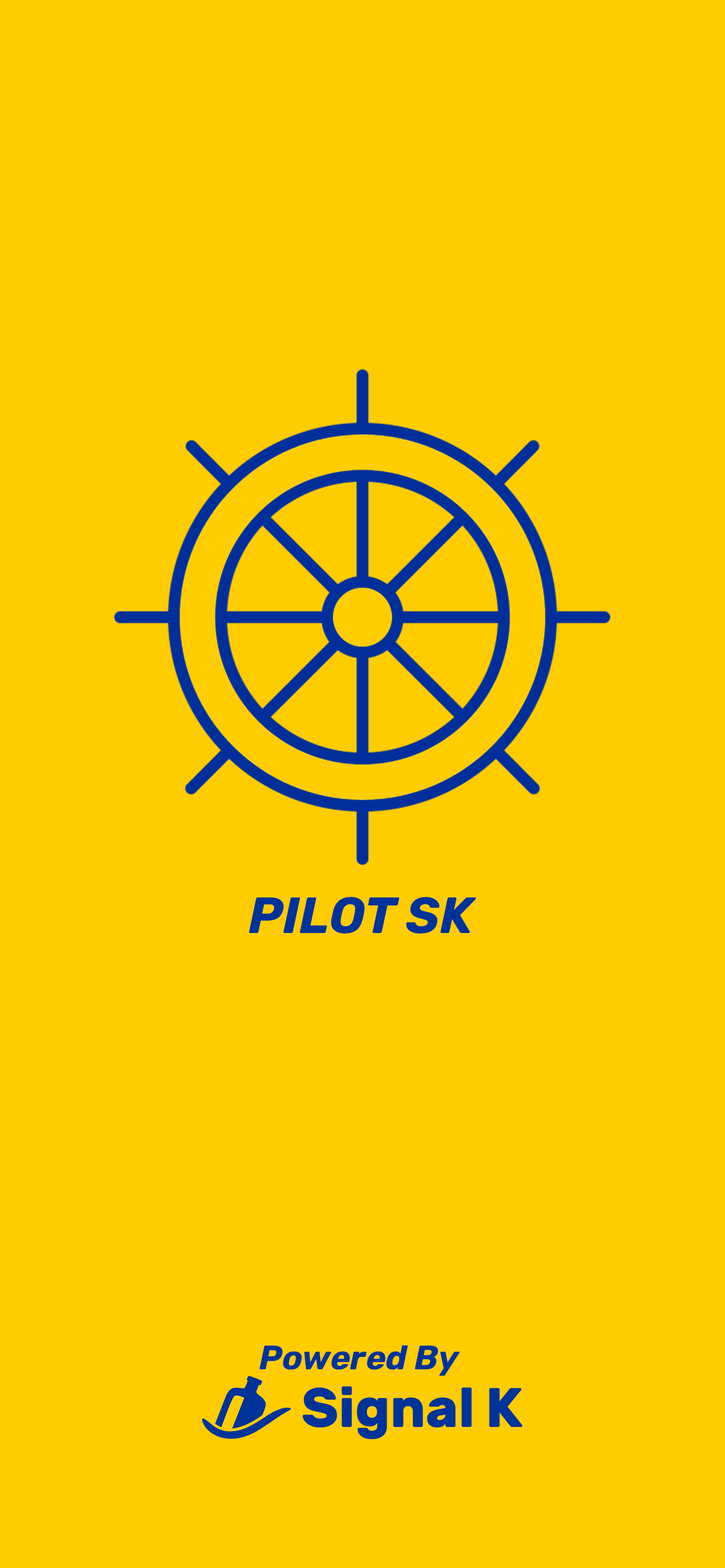
<style>
.page{position:relative;width:725px;height:1568px;background:#ffcc00}
.page>*{position:absolute;margin:0}
.t1{font:50.8px "Rubik-BoldItalic";color:#003399}
.t2{font:33.9px "Rubik-BoldItalic";color:#003399}
</style>
<div class="page">
<p class="t1" style="left:249px;top:897px;width:227px;height:37px">PILOT SK</p>
<p class="t2" style="left:259px;top:1345px;width:200px;height:31px">Powered By</p>
</div>
